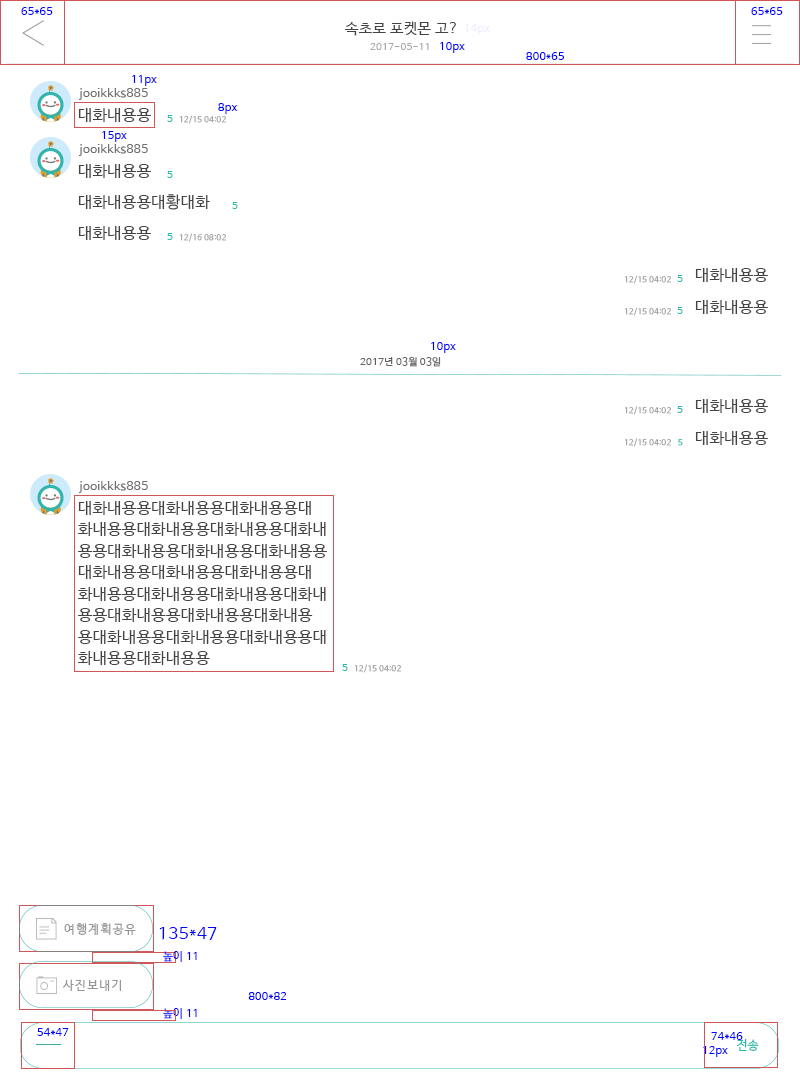
<style>
.page{position:relative;width:800px;height:1087px;background:#ffffff}
.page>*{position:absolute;margin:0}
.t1{font:11px "NanumBarunGothic";letter-spacing:0.025em;color:#0000ff}
.t2{font:15px "NanumBarunGothic";letter-spacing:0.025em;color:#434343}
.t3{font:11px "NanumBarunGothic";letter-spacing:0.025em;color:#eeeeff}
.t4{font:10px "NanumBarunGothic";letter-spacing:0.025em;color:#aaaaaa}
.t5{font:12px "NanumBarunGothic";letter-spacing:0.025em;color:#707070}
.t6{font:16px "NanumBarunGothic";letter-spacing:0.025em;color:#434343}
.t7{font:10px "NanumBarunGothic";letter-spacing:0.025em;color:#25b7aa}
.t8{font:8px "NanumBarunGothic";letter-spacing:0.025em;color:#a0a0a0}
.t9{font:10px "NanumBarunGothic";letter-spacing:0.025em;color:#626262}
.t10{font:8px "NanumBarunGothic";letter-spacing:0.025em}
.t11{font:16px/21.5px "NanumBarunGothic";letter-spacing:0.025em;color:#434343}
.t12{font:12.2px "NanumBarunGothic";letter-spacing:0.1em;color:#959595}
.t13{font:17px "NanumBarunGothic";letter-spacing:0.025em;color:#0000ff}
.t14{font:12px "NanumBarunGothic";letter-spacing:0.025em;color:#25b7aa}
</style>
<div class="page">
<p class="t1" style="left:21px;top:7px;width:32px;height:8px">65*65</p>
<p class="t1" style="left:751px;top:7px;width:32px;height:8px">65*65</p>
<p class="t2" style="left:345px;top:21px;width:111px;height:15px">속초로 포켓몬 고?</p>
<p class="t3" style="left:465px;top:24px;width:25px;height:11px">14px</p>
<p class="t4" style="left:370px;top:43px;width:59px;height:7px">2017-05-11</p>
<p class="t1" style="left:440px;top:42px;width:25px;height:11px">10px</p>
<p class="t1" style="left:526px;top:52px;width:39px;height:8px">800*65</p>
<p class="t1" style="left:132px;top:75px;width:25px;height:11px">11px</p>
<p class="t5" style="left:79px;top:88px;width:69px;height:12px">jooikkks885</p>
<p class="t6" style="left:78px;top:108px;width:73px;height:14px">대화내용용</p>
<p class="t1" style="left:218px;top:103px;width:20px;height:11px">8px</p>
<p class="t7" style="left:167px;top:115px;width:6px;height:7px">5</p>
<p class="t8" style="left:179px;top:115px;width:47px;height:9px">12/15 04:02</p>
<p class="t1" style="left:102px;top:131px;width:25px;height:11px">15px</p>
<p class="t5" style="left:79px;top:144px;width:69px;height:12px">jooikkks885</p>
<p class="t6" style="left:78px;top:164px;width:73px;height:14px">대화내용용</p>
<p class="t7" style="left:167px;top:171px;width:6px;height:7px">5</p>
<p class="t6" style="left:78px;top:194px;width:132px;height:16px">대화내용용대황대화</p>
<p class="t7" style="left:232px;top:202px;width:6px;height:7px">5</p>
<p class="t6" style="left:78px;top:226px;width:73px;height:14px">대화내용용</p>
<p class="t7" style="left:167px;top:233px;width:6px;height:7px">5</p>
<p class="t8" style="left:179px;top:233px;width:47px;height:9px">12/16 08:02</p>
<p class="t6" style="left:695px;top:268px;width:73px;height:14px">대화내용용</p>
<p class="t8" style="left:624px;top:275px;width:47px;height:9px">12/15 04:02</p>
<p class="t7" style="left:677px;top:275px;width:6px;height:7px">5</p>
<p class="t6" style="left:695px;top:300px;width:73px;height:14px">대화내용용</p>
<p class="t8" style="left:624px;top:307px;width:47px;height:9px">12/15 04:02</p>
<p class="t7" style="left:677px;top:307px;width:6px;height:7px">5</p>
<p class="t1" style="left:431px;top:342px;width:25px;height:11px">10px</p>
<p class="t9" style="left:360px;top:356px;width:81px;height:11px">2017년 03월 03일</p>
<p class="t6" style="left:695px;top:399px;width:73px;height:14px">대화내용용</p>
<p class="t8" style="left:624px;top:406px;width:47px;height:9px">12/15 04:02</p>
<p class="t7" style="left:677px;top:406px;width:6px;height:7px">5</p>
<p class="t8" style="left:624px;top:438px;width:47px;height:9px">12/15 04:02</p>
<p class="t6" style="left:695px;top:431px;width:73px;height:14px">대화내용용</p>
<p class="t10" style="left:678px;top:439px;width:5px;height:7px">5</p>
<p class="t5" style="left:79px;top:481px;width:69px;height:12px">jooikkks885</p>
<p class="t11" style="left:78px;top:501px;width:249px;height:164px">대화내용용대화내용용대화내용용대<br>화내용용대화내용용대화내용용대화내<br>용용대화내용용대화내용용대화내용용<br>대화내용용대화내용용대화내용용대<br>화내용용대화내용용대화내용용대화내<br>용용대화내용용대화내용용대화내용<br>용대화내용용대화내용용대화내용용대<br>화내용용대화내용용</p>
<p class="t7" style="left:342px;top:664px;width:6px;height:7px">5</p>
<p class="t8" style="left:354px;top:664px;width:47px;height:9px">12/15 04:02</p>
<p class="t12" style="left:64px;top:923px;width:72px;height:12px">여행계획공유</p>
<p class="t13" style="left:159px;top:927px;width:58px;height:13px">135*47</p>
<p class="t1" style="left:163px;top:951px;width:34px;height:11px">높이 11</p>
<p class="t12" style="left:62px;top:979px;width:59px;height:12px">사진보내기</p>
<p class="t1" style="left:248px;top:992px;width:39px;height:8px">800*82</p>
<p class="t1" style="left:163px;top:1008px;width:34px;height:11px">높이 11</p>
<p class="t1" style="left:37px;top:1028px;width:32px;height:8px">54*47</p>
<p class="t1" style="left:711px;top:1032px;width:32px;height:8px">74*46</p>
<p class="t1" style="left:703px;top:1046px;width:25px;height:11px">12px</p>
<p class="t14" style="left:736px;top:1039px;width:23px;height:12px">전송</p>
</div>
